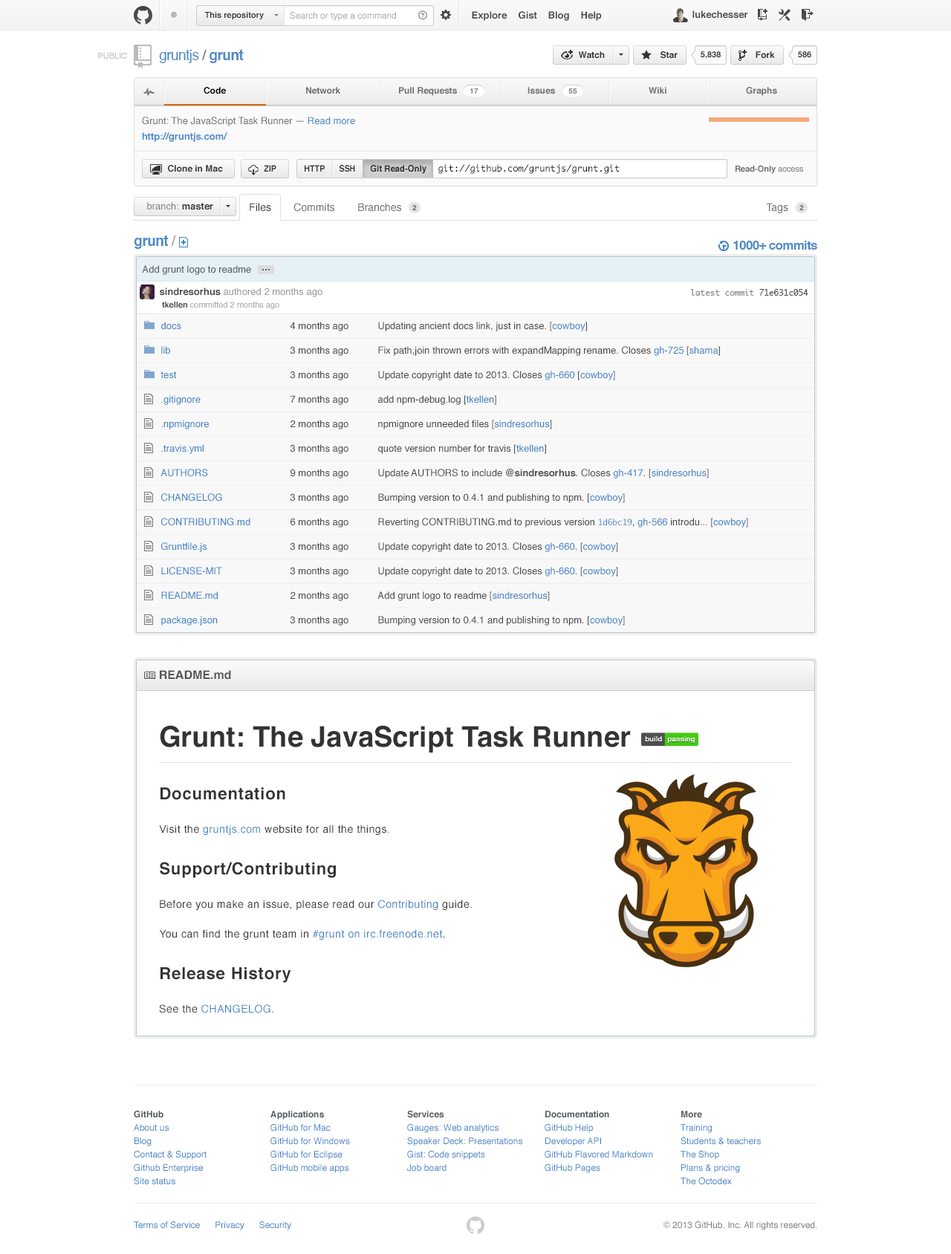
<style>
.page{position:relative;width:951px;height:1254px;background:#ffffff}
.page>*{position:absolute;margin:0}
.t1{font:8.2px "Helvetica-Bold";color:#333333}
.t2{font:8.9px "Helvetica";color:#a9a9a9}
.t3{font:9.7px "Helvetica-Bold";color:#484848}
.t4{font:8.2px "Helvetica";color:#c1c1c1;text-transform:uppercase}
.t5{font:14.1px "Helvetica";letter-spacing:-0.03em;color:#4c8ac7}
.t6{font:14.1px "Helvetica";letter-spacing:-0.03em;color:#676767}
.t7{font:14.1px "Helvetica-Bold";letter-spacing:-0.03em;color:#4c8ac7}
.t8{font:8.9px "Helvetica-Bold";color:#333333}
.t9{font:8.9px "Helvetica-Bold";color:#000000}
.t10{font:8.9px "Helvetica-Bold";color:#6e6e6e}
.t11{font:7.4px "Helvetica-Bold";color:#818181}
.t12{font:9.7px "Helvetica";color:#737373}
.t13{font:9.7px "Helvetica";color:#4686c5}
.t14{font:9.7px "Helvetica-Bold";color:#4988c6}
.t15{font:8.9px "Helvetica-Bold";color:#333333;scale:0.9 1}
.t16{font:8.9px "Helvetica-Bold";color:#333333;font-weight:bold;scale:0.9 1}
.t17{font:8.9px "Monaco";color:#000000}
.t18{font:8.2px "Helvetica-Bold";color:#666666}
.t19{font:8.2px "Helvetica";color:#666666}
.t20{font:9.7px "Helvetica";color:#808080}
.t21{font:9.7px "Helvetica-Bold";color:#333333}
.t22{font:10.4px "Helvetica";color:#333333}
.t23{font:10.4px "Helvetica";color:#686868}
.t24{font:7.4px "Helvetica-Bold";color:#686868}
.t25{font:14.1px "Helvetica";letter-spacing:-0.03em;color:#9c9c9c}
.t26{font:12.6px "Helvetica-Bold";letter-spacing:-0.04em;color:#4c8ac7}
.t27{font:9.7px "Helvetica";color:#50595d}
.t28{font:9.7px "Helvetica";color:#999999}
.t29{font:9.7px "Helvetica-Bold";color:#444444}
.t30{font:8.2px "Monaco";color:#888888}
.t31{font:8.2px "Monaco";color:#4d4d4d}
.t32{font:8.2px "Helvetica";color:#9d9d9d}
.t33{font:8.2px "Helvetica-Bold";color:#444444}
.t34{font:9.7px "Helvetica";color:#4183c4}
.t35{font:9.7px "Helvetica";color:#484848}
.t36{font:9.7px "Helvetica";color:#4585c4}
.t37{font:8.2px "Monaco";color:#4585c4}
.t38{font:11.9px "Helvetica-Bold";color:#555555}
.t39{font:28.2px "Helvetica-Bold";color:#333333}
.t40{font:7.4px "Helvetica";letter-spacing:0.04em;color:#ffffff}
.t41{font:16.3px "Helvetica-Bold";letter-spacing:0.04em;color:#333333}
.t42{font:10.4px "Helvetica";letter-spacing:0.04em;color:#333333}
.t43{font:10.4px "Helvetica";letter-spacing:0.04em;color:#4c8ac7}
.t44{font:10.4px "Helvetica";letter-spacing:0.04em;color:#4183c4}
.t45{font:8.9px/13.4px "Helvetica";color:#4183c4}
.t46{font:8.9px/13.4px "Helvetica-Bold";color:#52595d}
.t47{font:8.9px "Helvetica";color:#4183c4}
.t48{font:8.9px "Helvetica";color:#777777}
</style>
<div class="page">
<p class="t1" style="left:204px;top:12px;width:60px;height:8px">This repository</p>
<p class="t2" style="left:290px;top:12px;width:106px;height:9px">Search or type a command</p>
<p class="t3" style="left:472px;top:11px;width:35px;height:10px">Explore</p>
<p class="t3" style="left:519px;top:11px;width:18px;height:8px">Gist</p>
<p class="t3" style="left:548px;top:11px;width:21px;height:10px">Blog</p>
<p class="t3" style="left:581px;top:11px;width:21px;height:10px">Help</p>
<p class="t3" style="left:692px;top:10px;width:56px;height:9px">lukechesser</p>
<p class="t4" style="left:98px;top:53px;width:29px;height:6px">Public</p>
<p class="t5" style="left:159px;top:50px;width:85px;height:13px">gruntjs <span class="t6">/ </span><span class="t7">grunt</span></p>
<p class="t8" style="left:578px;top:51px;width:27px;height:8px">Watch</p>
<p class="t8" style="left:660px;top:51px;width:18px;height:8px">Star</p>
<p class="t1" style="left:701px;top:51px;width:20px;height:8px">5,838</p>
<p class="t8" style="left:756px;top:51px;width:19px;height:8px">Fork</p>
<p class="t1" style="left:798px;top:51px;width:13px;height:7px">586</p>
<p class="t9" style="left:204px;top:87px;width:22px;height:7px">Code</p>
<p class="t10" style="left:306px;top:87px;width:34px;height:7px">Network</p>
<p class="t10" style="left:399px;top:87px;width:58px;height:9px">Pull Requests</p>
<p class="t11" style="left:470px;top:88px;width:8px;height:6px">17</p>
<p class="t10" style="left:527px;top:87px;width:28px;height:7px">Issues</p>
<p class="t11" style="left:568px;top:88px;width:9px;height:6px">55</p>
<p class="t10" style="left:649px;top:87px;width:17px;height:7px">Wiki</p>
<p class="t10" style="left:746px;top:87px;width:31px;height:9px">Graphs</p>
<p class="t12" style="left:142px;top:117px;width:213px;height:9px">Grunt: The JavaScript Task Runner — <span class="t13">Read more</span></p>
<p class="t14" style="left:142px;top:132px;width:85px;height:10px">http://gruntjs.com/</p>
<p class="t8" style="left:168px;top:165px;width:55px;height:7px">Clone in Mac</p>
<p class="t15" style="left:264px;top:165px;width:12px;height:7px">ZIP</p>
<p class="t15" style="left:305px;top:165px;width:20px;height:7px">HTTP</p>
<p class="t15" style="left:339px;top:165px;width:16px;height:7px">SSH</p>
<p class="t16" style="left:370px;top:165px;width:56px;height:9px">Git Read-Only</p>
<p class="t17" style="left:438px;top:164px;width:182px;height:10px">git://github.com/gruntjs/grunt.git</p>
<p class="t18" style="left:735px;top:165px;width:68px;height:9px">Read-Only<span class="t19"> access</span></p>
<p class="t20" style="left:147px;top:202px;width:66px;height:8px">branch:<span class="t21"> master</span></p>
<p class="t22" style="left:250px;top:203px;width:21px;height:9px">Files</p>
<p class="t23" style="left:293px;top:203px;width:41px;height:9px">Commits</p>
<p class="t23" style="left:358px;top:203px;width:43px;height:9px">Branches</p>
<p class="t24" style="left:412px;top:205px;width:5px;height:5px">2</p>
<p class="t23" style="left:766px;top:203px;width:22px;height:10px">Tags</p>
<p class="t24" style="left:799px;top:205px;width:5px;height:5px">2</p>
<p class="t7" style="left:134px;top:235px;width:42px;height:14px">grunt <span class="t25">/</span></p>
<p class="t26" style="left:733px;top:241px;width:84px;height:9px">1000+ commits</p>
<p class="t27" style="left:142px;top:265px;width:109px;height:10px">Add grunt logo to readme</p>
<p class="t28" style="left:160px;top:287px;width:162px;height:10px"><span class="t29">sindresorhus </span>authored 2 months ago</p>
<p class="t30" style="left:690px;top:289px;width:118px;height:7px">latest commit <span class="t31">71e631c054</span></p>
<p class="t32" style="left:162px;top:302px;width:117px;height:8px"><span class="t33">tkellen </span>committed 2 months ago</p>
<p class="t34" style="left:161px;top:322px;width:20px;height:8px">docs</p>
<p class="t35" style="left:290px;top:322px;width:58px;height:9px">4 months ago</p>
<p class="t35" style="left:378px;top:322px;width:209px;height:9px">Updating ancient docs link, just in case. [<span class="t36">cowboy</span>]</p>
<p class="t34" style="left:161px;top:346px;width:9px;height:8px">lib</p>
<p class="t35" style="left:290px;top:346px;width:58px;height:10px">3 months ago</p>
<p class="t35" style="left:378px;top:346px;width:342px;height:10px">Fix path,join thrown errors with expandMapping rename. Closes <span class="t36">gh-725</span> [<span class="t36">shama</span>]</p>
<p class="t34" style="left:160px;top:371px;width:16px;height:8px">test</p>
<p class="t35" style="left:290px;top:371px;width:58px;height:9px">3 months ago</p>
<p class="t35" style="left:378px;top:371px;width:237px;height:9px">Update copyright date to 2013. Closes <span class="t36">gh-660</span> [<span class="t36">cowboy</span>]</p>
<p class="t34" style="left:161px;top:395px;width:40px;height:10px">.gitignore</p>
<p class="t35" style="left:290px;top:395px;width:58px;height:10px">7 months ago</p>
<p class="t35" style="left:378px;top:395px;width:118px;height:10px">add npm-debug.log [<span class="t36">tkellen</span>]</p>
<p class="t34" style="left:161px;top:420px;width:48px;height:9px">.npmignore</p>
<p class="t35" style="left:290px;top:420px;width:58px;height:9px">2 months ago</p>
<p class="t35" style="left:378px;top:420px;width:174px;height:9px">npmignore unneeded files [<span class="t36">sindresorhus</span>]</p>
<p class="t34" style="left:161px;top:444px;width:43px;height:10px">.travis.yml</p>
<p class="t35" style="left:290px;top:444px;width:58px;height:10px">3 months ago</p>
<p class="t35" style="left:378px;top:444px;width:168px;height:10px">quote version number for travis [<span class="t36">tkellen</span>]</p>
<p class="t34" style="left:160px;top:469px;width:48px;height:8px">AUTHORS</p>
<p class="t35" style="left:290px;top:469px;width:58px;height:9px">9 months ago</p>
<p class="t35" style="left:378px;top:469px;width:331px;height:9px">Update AUTHORS to include <span class="t3">@sindresorhus</span>. Closes <span class="t36">gh-417</span>. [<span class="t36">sindresorhus</span>]</p>
<p class="t34" style="left:161px;top:493px;width:61px;height:8px">CHANGELOG</p>
<p class="t35" style="left:290px;top:493px;width:58px;height:10px">3 months ago</p>
<p class="t35" style="left:378px;top:493px;width:247px;height:10px">Bumping version to 0.4.1 and publishing to npm. [<span class="t36">cowboy</span>]</p>
<p class="t34" style="left:161px;top:518px;width:89px;height:8px">CONTRIBUTING.md</p>
<p class="t35" style="left:290px;top:518px;width:58px;height:9px">6 months ago</p>
<p class="t35" style="left:378px;top:518px;width:370px;height:9px">Reverting CONTRIBUTING.md to previous version <span class="t37">1d6bc19</span>, <span class="t36">gh-566 </span>introdu... [<span class="t36">cowboy</span>]</p>
<p class="t34" style="left:161px;top:542px;width:46px;height:10px">Gruntfile.js</p>
<p class="t35" style="left:290px;top:542px;width:58px;height:10px">3 months ago</p>
<p class="t35" style="left:378px;top:542px;width:240px;height:10px">Update copyright date to 2013. Closes <span class="t36">gh-660</span>. [<span class="t36">cowboy</span>]</p>
<p class="t34" style="left:161px;top:567px;width:61px;height:8px">LICENSE-MIT</p>
<p class="t35" style="left:290px;top:567px;width:58px;height:9px">3 months ago</p>
<p class="t35" style="left:378px;top:567px;width:240px;height:9px">Update copyright date to 2013. Closes <span class="t36">gh-660</span>. [<span class="t36">cowboy</span>]</p>
<p class="t34" style="left:161px;top:591px;width:57px;height:9px">README.md</p>
<p class="t35" style="left:290px;top:591px;width:58px;height:10px">2 months ago</p>
<p class="t35" style="left:377px;top:591px;width:173px;height:10px">Add grunt logo to readme [<span class="t36">sindresorhus</span>]</p>
<p class="t34" style="left:161px;top:616px;width:57px;height:10px">package.json</p>
<p class="t35" style="left:290px;top:616px;width:58px;height:10px">3 months ago</p>
<p class="t35" style="left:378px;top:616px;width:247px;height:10px">Bumping version to 0.4.1 and publishing to npm. [<span class="t36">cowboy</span>]</p>
<p class="t38" style="left:160px;top:670px;width:71px;height:10px">README.md</p>
<p class="t39" style="left:160px;top:725px;width:471px;height:28px">Grunt: The JavaScript Task Runner</p>
<p class="t40" style="left:645px;top:736px;width:17px;height:5px">build</p>
<p class="t40" style="left:668px;top:736px;width:27px;height:7px">passing</p>
<p class="t41" style="left:160px;top:787px;width:125px;height:13px">Documentation</p>
<p class="t42" style="left:159px;top:825px;width:230px;height:10px">Visit the <span class="t43">gruntjs.com</span> website for all the things.</p>
<p class="t41" style="left:160px;top:862px;width:176px;height:16px">Support/Contributing</p>
<p class="t42" style="left:160px;top:900px;width:312px;height:10px">Before you make an issue, please read our <span class="t44">Contributing</span> guide.</p>
<p class="t42" style="left:160px;top:929px;width:285px;height:11px">You can find the grunt team in <span class="t44">#grunt on irc.freenode.net</span>.</p>
<p class="t41" style="left:160px;top:967px;width:131px;height:16px">Release History</p>
<p class="t44" style="left:159px;top:1004px;width:114px;height:9px"><span class="t42">See the </span>CHANGELOG<span class="t42">.</span></p>
<p class="t45" style="left:134px;top:1111px;width:73px;height:74px"><span class="t46">GitHub<br></span>About us<br>Blog<br>Contact &amp; Support<br>Github Enterprise<br>Site status</p>
<p class="t45" style="left:270px;top:1111px;width:80px;height:62px"><span class="t46">Applications<br></span>GitHub for Mac<br>GitHub for Windows<br>GitHub for Eclipse<br>GitHub mobile apps</p>
<p class="t45" style="left:407px;top:1111px;width:116px;height:61px"><span class="t46">Services<br></span>Gauges: Web analytics<br>Speaker Deck: Presentations<br>Gist: Code snippets<br>Job board</p>
<p class="t45" style="left:545px;top:1111px;width:108px;height:62px"><span class="t46">Documentation<br></span>GitHub Help<br>Developer API<br>GitHub Flavored Markdown<br>GitHub Pages</p>
<p class="t45" style="left:680px;top:1111px;width:81px;height:74px"><span class="t46">More<br></span>Training<br>Students &amp; teachers<br>The Shop<br>Plans &amp; pricing<br>The Octodex</p>
<p class="t47" style="left:134px;top:1221px;width:157px;height:9px">Terms of Service      Privacy      Security</p>
<p class="t48" style="left:663px;top:1221px;width:154px;height:9px">© 2013 GitHub, Inc. All rights reserved.</p>
</div>
